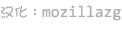
<style>
.page{position:relative;width:122px;height:29px;background:#ffffff}
.page>*{position:absolute;margin:0}
.t1{font:16px "YaHei-Consolas-Hybrid";color:#adadad}
.t2{font:14px "DFGirl";color:#adadad}
</style>
<div class="page">
<p class="t1" style="left:1px;top:5px;width:120px;height:16px"><span class="t2">汉化：</span>mozillazg</p>
</div>
